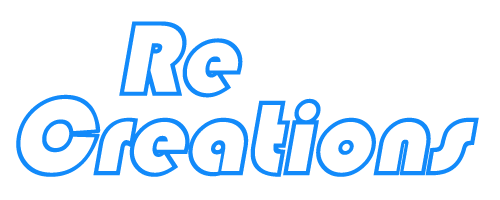
<style>
.page{position:relative;width:500px;height:200px;background:#ffffff}
.page>*{position:absolute;margin:0}
.t1{font:105.7px "STCaiyun";color:#128afa;font-style:italic}
</style>
<div class="page">
<p class="t1" style="left:119px;top:21px;width:124px;height:77px">Re</p>
<p class="t1" style="left:16px;top:94px;width:463px;height:83px">Creations</p>
</div>
